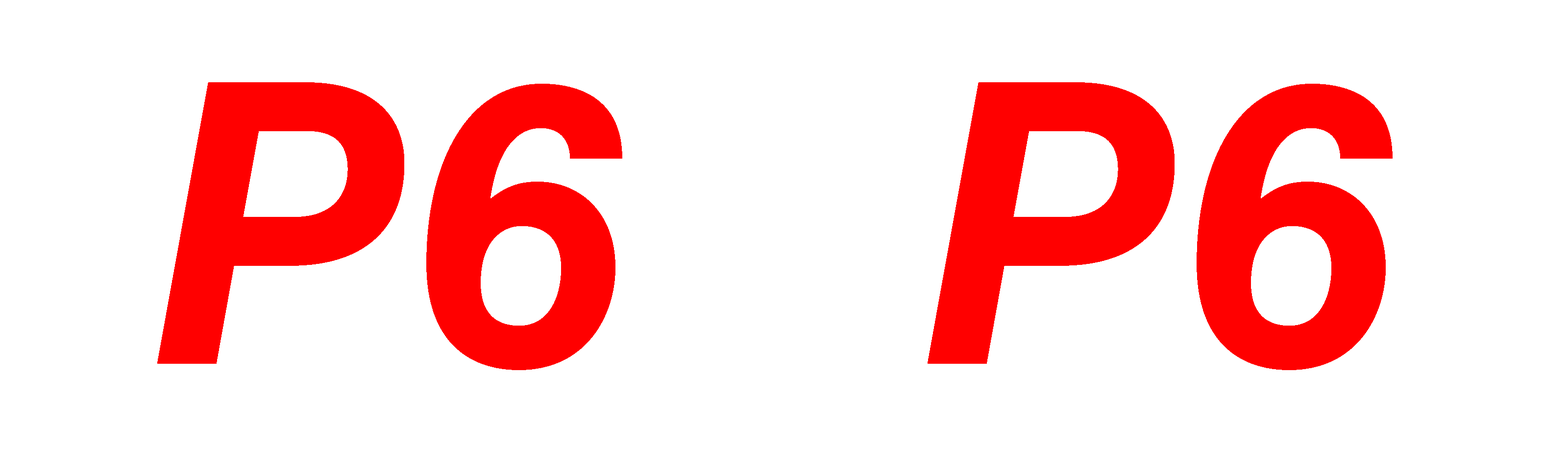
<style>
.page{position:relative;width:1568px;height:470px;background:#ffffff}
.page>*{position:absolute;margin:0}
.t1{font:392px "HelveticaLTStd-BoldObl";color:#ff0000}
</style>
<div class="page">
<p class="t1" style="left:157px;top:82px;width:465px;height:288px">P6</p>
<p class="t1" style="left:928px;top:82px;width:465px;height:288px">P6</p>
</div>
